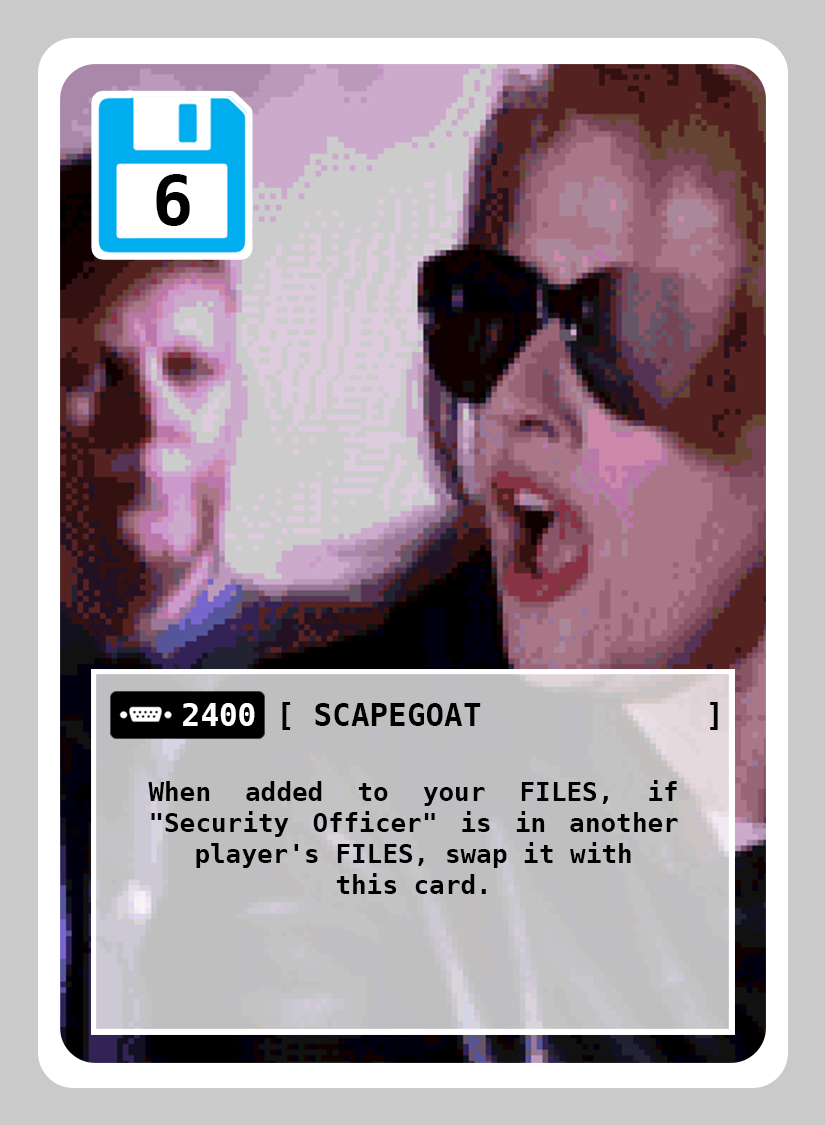
<style>
.page{position:relative;width:825px;height:1125px}
.page>*{position:absolute;margin:0}
.t1{font:69px "DejaVuSansMono-Bold";color:#000000}
.t2{font:31px "DejaVuSansMono-Bold";color:#ffffff}
.t3{font:31px "DejaVuSansMono-Bold";color:#000000}
.t4{font:26px "DejaVuSansMono-Bold";color:#000000}
</style>
<div class="page">
<p class="t1" style="left:156px;top:174px;width:34px;height:52px">6</p>
<p class="t2" style="left:183px;top:703px;width:72px;height:23px">2400</p>
<p class="t3" style="left:315px;top:703px;width:166px;height:23px">SCAPEGOAT</p>
<p class="t4" style="left:148px;top:780px;width:530px;height:114px;text-align:justify">When added to your FILES, if "Security Officer" is in another player's FILES, swap it with<br>this card.</p>
</div>
